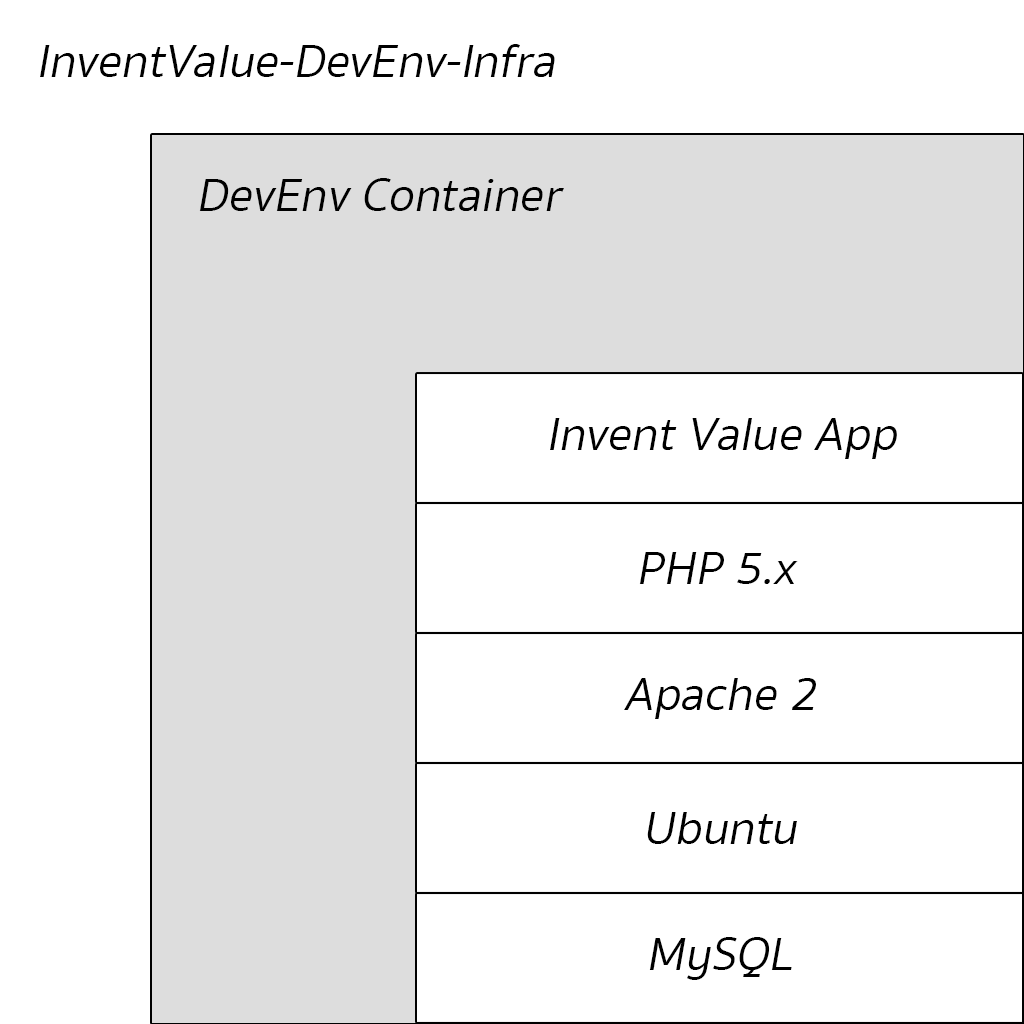
<style>
.page{position:relative;width:1024px;height:1024px;background:#ffffff}
.page>*{position:absolute;margin:0}
.t1{font:48px "SukhumvitSet-Text";color:#000000;font-style:italic}
</style>
<div class="page">
<p class="t1" style="left:40px;top:44px;width:515px;height:33px">InventValue-DevEnv-Infra</p>
<p class="t1" style="left:199px;top:178px;width:365px;height:33px">DevEnv Container</p>
<p class="t1" style="left:550px;top:418px;width:347px;height:41px">Invent Value App</p>
<p class="t1" style="left:639px;top:552px;width:159px;height:32px">PHP 5.x</p>
<p class="t1" style="left:624px;top:678px;width:192px;height:41px">Apache 2</p>
<p class="t1" style="left:647px;top:812px;width:150px;height:32px">Ubuntu</p>
<p class="t1" style="left:649px;top:937px;width:143px;height:43px">MySQL</p>
</div>
